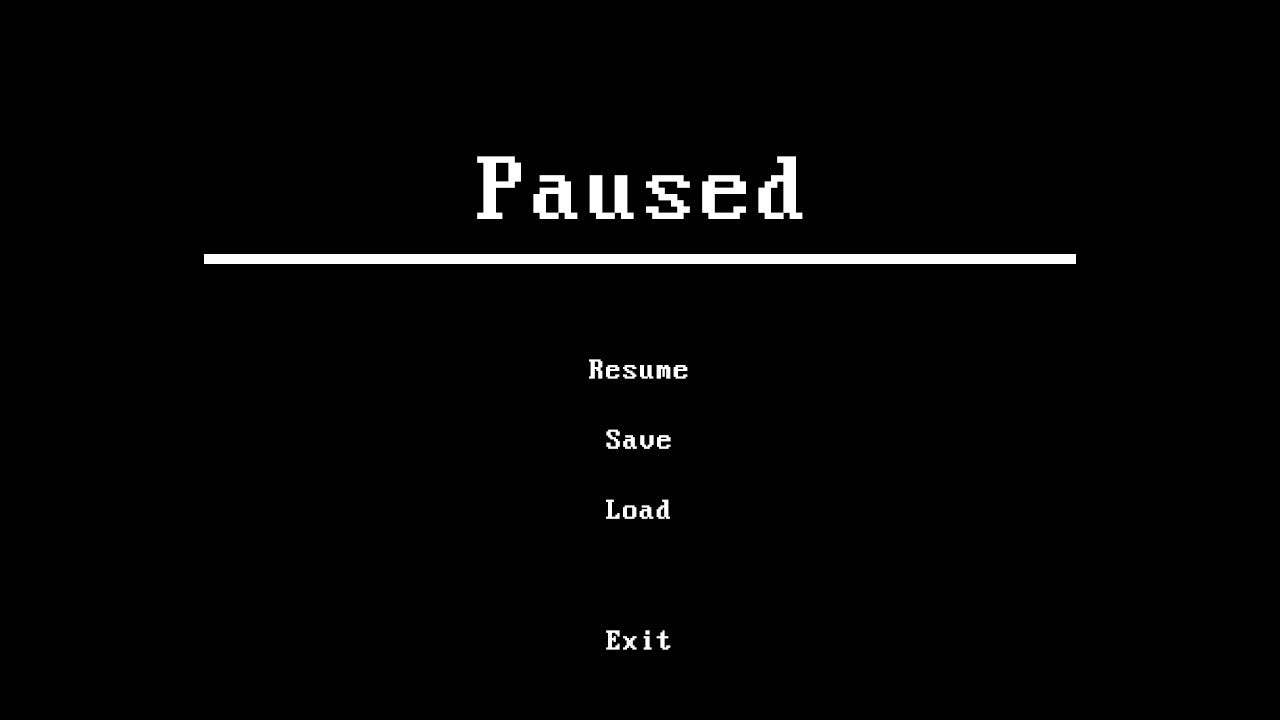
<style>
.page{position:relative;width:1280px;height:720px;background:#000000}
.page>*{position:absolute;margin:0}
.t1{font:100px "PerfectDOSVGA437";color:#ffffff}
.t2{font:30.2px "PerfectDOSVGA437";color:#ffffff}
.t3{font:30px "PerfectDOSVGA437";color:#ffffff}
</style>
<div class="page">
<p class="t1" style="left:477px;top:156px;width:326px;height:63px">Paused</p>
<p class="t2" style="left:589px;top:359px;width:99px;height:20px">Resume</p>
<p class="t3" style="left:606px;top:429px;width:65px;height:20px">Save</p>
<p class="t3" style="left:606px;top:499px;width:64px;height:20px">Load</p>
<p class="t3" style="left:606px;top:630px;width:65px;height:20px">Exit</p>
</div>
